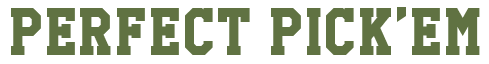
<style>
.page{position:relative;width:489px;height:64px;background:#ffffff}
.page>*{position:absolute;margin:0}
.t1{font:60px "HighSchoolUSASerif";color:#607242}
</style>
<div class="page">
<p class="t1" style="left:11px;top:7px;width:469px;height:48px">Perfect Pick’em</p>
</div>
